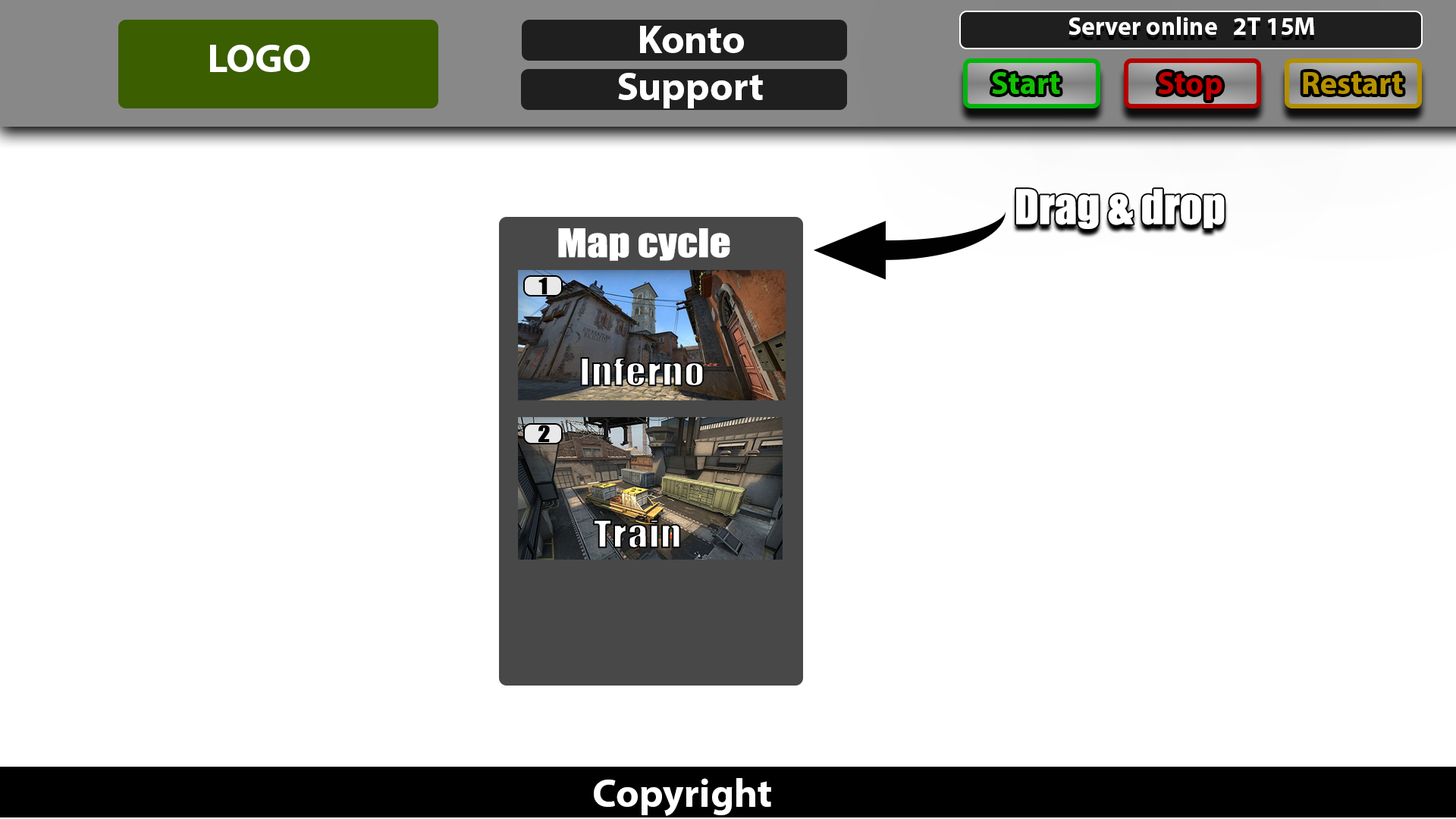
<style>
.page{position:relative;width:1456px;height:819px;background:#ffffff}
.page>*{position:absolute;margin:0}
.t1{font:25.3px "MyriadPro-Bold";color:#ffffff}
.t2{font:40.3px "MyriadPro-Bold";color:#ffffff}
.t3{font:31.6px "MyriadPro-Bold";color:#12c000}
.t4{font:31.6px "MyriadPro-Bold";color:#c00000}
.t5{font:31.6px "MyriadPro-Bold";color:#b59100}
.t6{font:44.2px "Impact";color:#ffffff}
.t7{font:36.4px "Impact";color:#ffffff;scale:1.16 1}
.t8{font:21.1px "Impact";color:#000000;scale:1.16 1}
.t9{font:36.4px "Impact";scale:1.16 1}
</style>
<div class="page">
<p class="t1" style="left:1068px;top:17px;width:246px;height:18px">Server online   2T 15M</p>
<p class="t2" style="left:640px;top:26px;width:104px;height:27px">Konto</p>
<p class="t2" style="left:210px;top:45px;width:100px;height:27px">LOGO</p>
<p class="t2" style="left:618px;top:73px;width:145px;height:35px">Support</p>
<p class="t3" style="left:992px;top:72px;width:68px;height:22px">Start</p>
<p class="t4" style="left:1158px;top:72px;width:64px;height:28px">Stop</p>
<p class="t5" style="left:1303px;top:72px;width:100px;height:22px">Restart</p>
<p class="t6" style="left:1016px;top:189px;width:209px;height:40px">Drag &amp; drop</p>
<p class="t7" style="left:558px;top:228px;width:172px;height:33px">Map cycle</p>
<p class="t8" style="left:538px;top:278px;width:10px;height:17px">1</p>
<p class="t9" style="left:580px;top:357px;width:124px;height:30px">Inferno</p>
<p class="t8" style="left:538px;top:425px;width:12px;height:17px">2</p>
<p class="t9" style="left:593px;top:519px;width:88px;height:30px">Train</p>
<p class="t2" style="left:594px;top:778px;width:177px;height:38px">Copyright</p>
</div>
